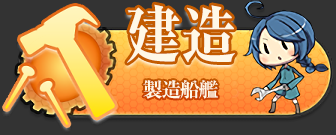
<style>
.page{position:relative;width:336px;height:135px;background:#333333}
.page>*{position:absolute;margin:0}
.t1{font:62.5px "RyuminPro-ExBold";color:#fff8e7;scale:0.9 1}
.t2{font:20px "RyuminPro-ExBold";letter-spacing:-0.08em;color:#fff8e7}
</style>
<div class="page">
<p class="t1" style="left:127px;top:4px;width:108px;height:59px">建造</p>
<p class="t2" style="left:143px;top:80px;width:75px;height:19px">製造船艦</p>
</div>
